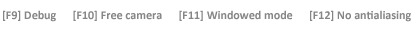
<style>
.page{position:relative;width:420px;height:30px;background:#ffffff}
.page>*{position:absolute;margin:0}
.t1{font:12px "Calibri-Bold";color:#868686}
</style>
<div class="page">
<p class="t1" style="left:3px;top:10px;width:408px;height:12px">[F9] Debug      [F10] Free camera      [F11] Windowed mode      [F12] No antialiasing</p>
</div>
